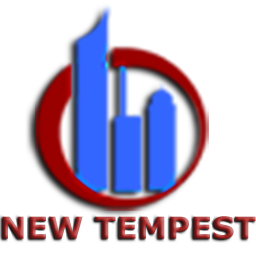
<style>
.page{position:relative;width:256px;height:256px;background:#ffffff}
.page>*{position:absolute;margin:0}
.t1{font:29.8px "Verdana-Bold";scale:1.06 1}
</style>
<div class="page">
<p class="t1" style="left:2px;top:216px;width:254px;height:23px">NEW TEMPEST</p>
</div>
